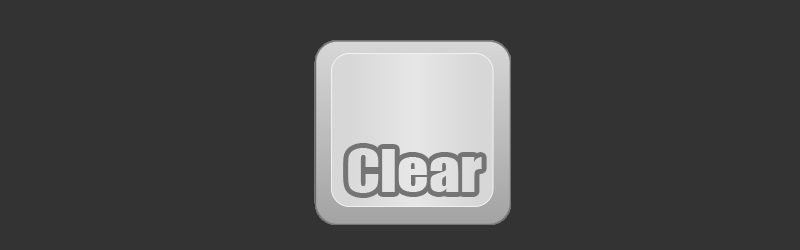
<style>
.page{position:relative;width:800px;height:250px;background:#333333}
.page>*{position:absolute;margin:0}
.t1{font:53.6px "Impact";color:#e8e8e8;scale:1.15 1}
</style>
<div class="page">
<p class="t1" style="left:348px;top:148px;width:134px;height:45px">Clear</p>
</div>
